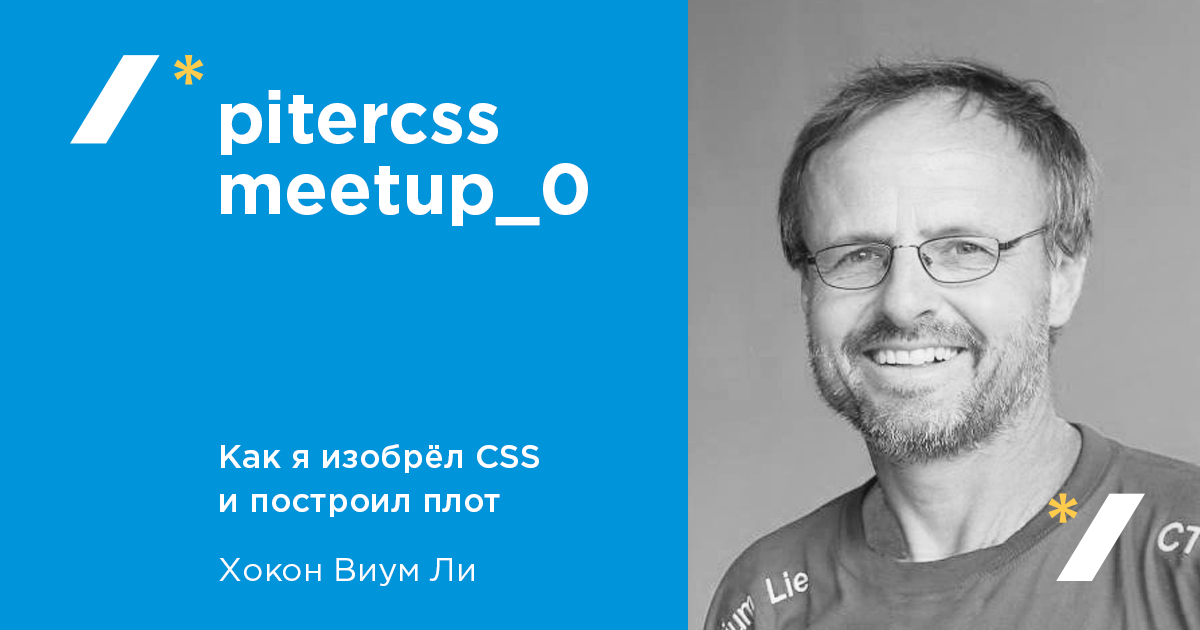
<style>
.page{position:relative;width:1200px;height:630px;background:#0094da}
.page>*{position:absolute;margin:0}
.t1{font:72px/70.5px "GothamPro-Bold";color:#ffffff}
.t2{font:33px/44px "GothamPro-Medium";color:#ffffff}
.t3{font:33px/44px "GothamPro";color:#ffffff}
</style>
<div class="page">
<p class="t1" style="left:221px;top:90px;width:367px;height:136px">pitercss<br>meetup_0</p>
<p class="t2" style="left:219px;top:444px;width:320px;height:142px">Как я изобрёл CSS<br>и построил плот<br><span class="t3">Хокон Виум Ли</span></p>
</div>
